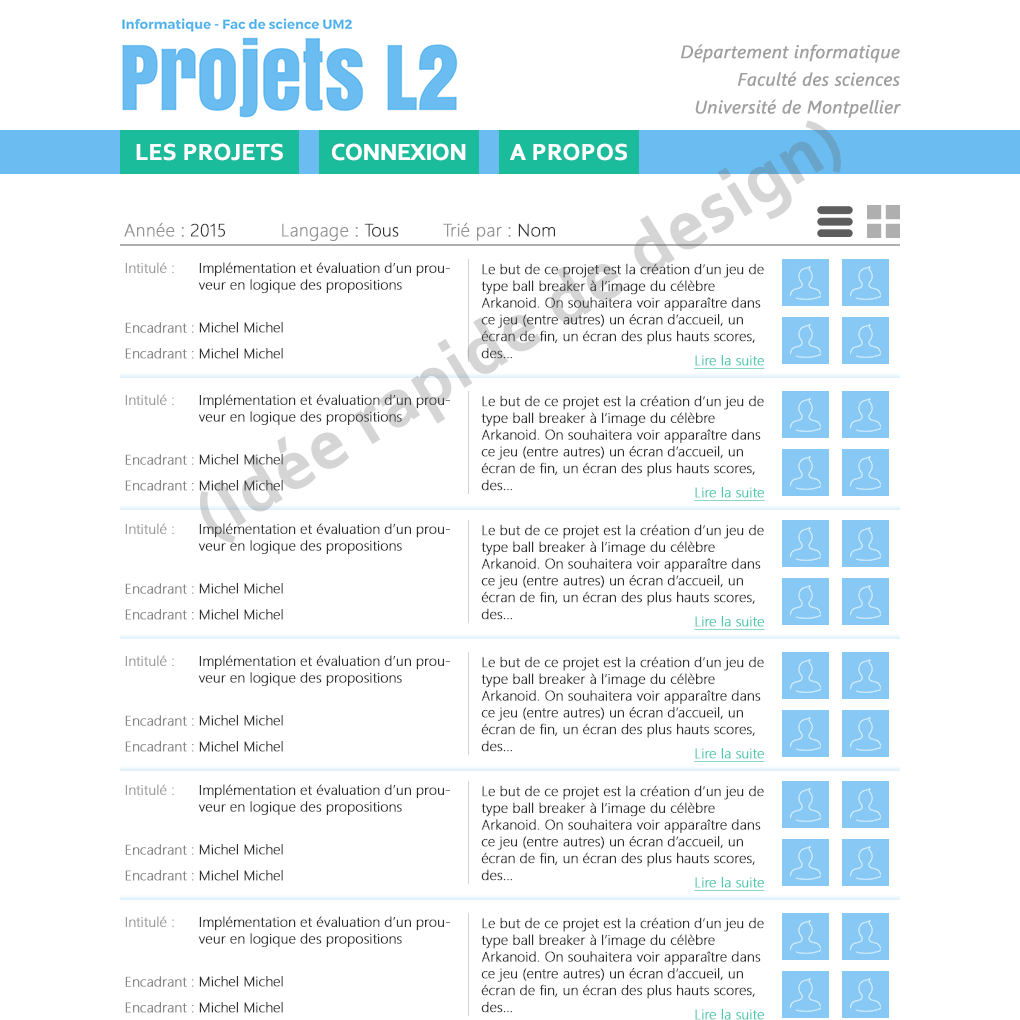
<style>
.page{position:relative;width:1020px;height:1020px;background:#ffffff}
.page>*{position:absolute;margin:0}
.t1{font:18px "SegoeUI-Italic";color:#9f9f9f;font-weight:bold}
.t2{font:24px "Corbel-Bold";color:#ffffff;font-weight:bold}
.t3{font:24px "Corbel-Bold";letter-spacing:-0.035em;color:#ffffff;font-weight:bold}
.t4{font:18px "SegoeUI-Light";color:#929292;font-weight:bold}
.t5{font:14px "SegoeUI-Light";color:#6a6a6a;font-weight:bold}
.t6{font:14px "SegoeUI-Light";color:#848484;font-weight:bold}
.t7{font:14px "SegoeUI-Light";color:#303030;font-weight:bold}
.t8{font:14px "SegoeUI-Light";color:#45c9af;font-weight:bold;text-decoration:underline}
</style>
<div class="page">
<p class="t1" style="left:681px;top:44px;width:220px;height:74px;text-align:right">Département informatique <br>Faculté des sciences <br>Université de Montpellier</p>
<p class="t2" style="left:136px;top:143px;width:147px;height:18px">LES PROJETS</p>
<p class="t3" style="left:332px;top:143px;width:134px;height:18px">CONNEXION</p>
<p class="t2" style="left:510px;top:143px;width:117px;height:18px">A PROPOS</p>
<p class="t4" style="left:124px;top:222px;width:431px;height:19px">Année : 2015          Langage : Tous        Trié par : Nom</p>
<p class="t5" style="left:125px;top:262px;width:69px;height:97px"><span class="t6">Intitulé :       <br></span>Encadrant : <br>Encadrant :</p>
<p class="t7" style="left:198px;top:262px;width:252px;height:97px">Implémentation et évaluation d’un prouveur en logique des propositions<br>Michel Michel<br>Michel Michel</p>
<p class="t7" style="left:481px;top:263px;width:283px;height:96px">Le but de ce projet est la création d’un jeu de type ball breaker à l’image du célèbre Arkanoid. On souhaitera voir apparaître dans ce jeu (entre autres) un écran d’accueil, un écran de fin, un écran des plus hauts scores, des...<br>une multitude d’effets et de bonus...</p>
<p class="t8" style="left:694px;top:355px;width:71px;height:14px">Lire la suite</p>
<p class="t5" style="left:125px;top:394px;width:69px;height:97px"><span class="t6">Intitulé :       <br></span>Encadrant : <br>Encadrant :</p>
<p class="t7" style="left:198px;top:394px;width:252px;height:97px">Implémentation et évaluation d’un prouveur en logique des propositions<br>Michel Michel<br>Michel Michel</p>
<p class="t7" style="left:481px;top:395px;width:283px;height:96px">Le but de ce projet est la création d’un jeu de type ball breaker à l’image du célèbre Arkanoid. On souhaitera voir apparaître dans ce jeu (entre autres) un écran d’accueil, un écran de fin, un écran des plus hauts scores, des...<br>une multitude d’effets et de bonus...</p>
<p class="t8" style="left:694px;top:487px;width:71px;height:14px">Lire la suite</p>
<p class="t5" style="left:125px;top:523px;width:69px;height:97px"><span class="t6">Intitulé :       <br></span>Encadrant : <br>Encadrant :</p>
<p class="t7" style="left:198px;top:523px;width:252px;height:97px">Implémentation et évaluation d’un prouveur en logique des propositions<br>Michel Michel<br>Michel Michel</p>
<p class="t7" style="left:481px;top:524px;width:283px;height:96px">Le but de ce projet est la création d’un jeu de type ball breaker à l’image du célèbre Arkanoid. On souhaitera voir apparaître dans ce jeu (entre autres) un écran d’accueil, un écran de fin, un écran des plus hauts scores, des...<br>une multitude d’effets et de bonus...</p>
<p class="t8" style="left:694px;top:616px;width:71px;height:14px">Lire la suite</p>
<p class="t5" style="left:125px;top:655px;width:69px;height:97px"><span class="t6">Intitulé :       <br></span>Encadrant : <br>Encadrant :</p>
<p class="t7" style="left:198px;top:655px;width:252px;height:97px">Implémentation et évaluation d’un prouveur en logique des propositions<br>Michel Michel<br>Michel Michel</p>
<p class="t7" style="left:481px;top:656px;width:283px;height:96px">Le but de ce projet est la création d’un jeu de type ball breaker à l’image du célèbre Arkanoid. On souhaitera voir apparaître dans ce jeu (entre autres) un écran d’accueil, un écran de fin, un écran des plus hauts scores, des...<br>une multitude d’effets et de bonus...</p>
<p class="t8" style="left:694px;top:748px;width:71px;height:14px">Lire la suite</p>
<p class="t5" style="left:125px;top:784px;width:69px;height:97px"><span class="t6">Intitulé :       <br></span>Encadrant : <br>Encadrant :</p>
<p class="t7" style="left:198px;top:784px;width:252px;height:97px">Implémentation et évaluation d’un prouveur en logique des propositions<br>Michel Michel<br>Michel Michel</p>
<p class="t7" style="left:481px;top:785px;width:283px;height:96px">Le but de ce projet est la création d’un jeu de type ball breaker à l’image du célèbre Arkanoid. On souhaitera voir apparaître dans ce jeu (entre autres) un écran d’accueil, un écran de fin, un écran des plus hauts scores, des...<br>une multitude d’effets et de bonus...</p>
<p class="t8" style="left:694px;top:877px;width:71px;height:14px">Lire la suite</p>
<p class="t5" style="left:125px;top:916px;width:69px;height:97px"><span class="t6">Intitulé :       <br></span>Encadrant : <br>Encadrant :</p>
<p class="t7" style="left:198px;top:916px;width:252px;height:97px">Implémentation et évaluation d’un prouveur en logique des propositions<br>Michel Michel<br>Michel Michel</p>
<p class="t7" style="left:481px;top:917px;width:283px;height:96px">Le but de ce projet est la création d’un jeu de type ball breaker à l’image du célèbre Arkanoid. On souhaitera voir apparaître dans ce jeu (entre autres) un écran d’accueil, un écran de fin, un écran des plus hauts scores, des...<br>une multitude d’effets et de bonus...</p>
</div>
